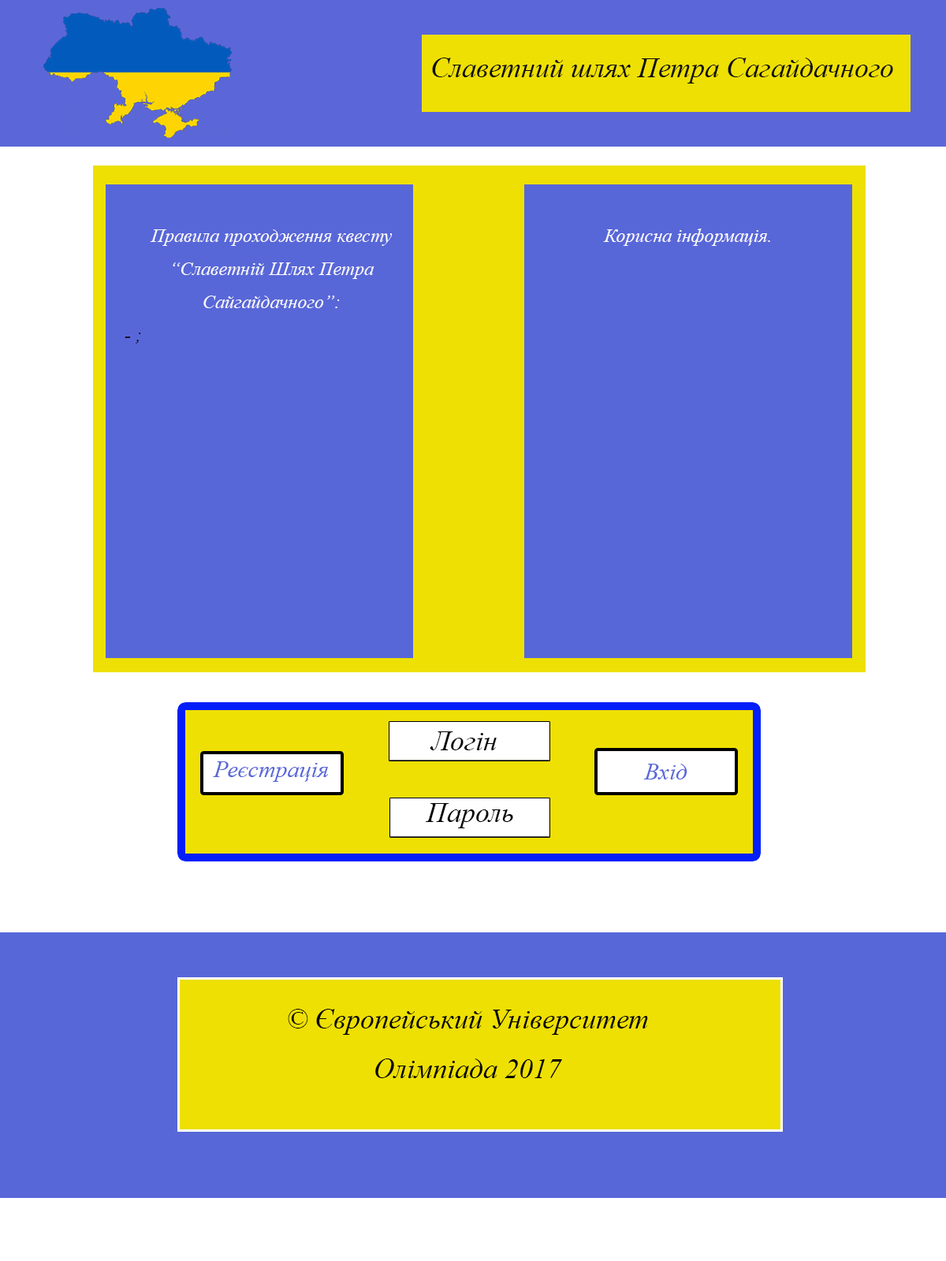
<style>
.page{position:relative;width:946px;height:1261px;background:#5867d8}
.page>*{position:absolute;margin:0}
.t1{font:28.4px "TimesNewRomanPS-ItalicMT";color:#0f0e0e}
.t2{font:18.9px "TimesNewRomanPS-ItalicMT";color:#fcfafa}
.t3{font:18.9px "TimesNewRomanPS-ItalicMT";color:#0f0e0e}
.t4{font:18.9px "TimesNewRomanPS-ItalicMT";color:#fffcfc}
.t5{font:28.4px "TimesNewRomanPS-ItalicMT";color:#060606}
.t6{font:23.6px "TimesNewRomanPS-ItalicMT";color:#5867d8}
.t7{font:28.4px "TimesNewRomanPS-ItalicMT";color:#050000}
</style>
<div class="page">
<p class="t1" style="left:432px;top:58px;width:461px;height:26px">Славетний шлях Петра Сагайдачного</p>
<p class="t2" style="left:125px;top:229px;width:267px;height:115px;text-align:center">Правила проходження квесту “Славетній Шлях Петра Сайгайдачного”:<br><span class="t3">- ;</span></p>
<p class="t4" style="left:603px;top:229px;width:167px;height:17px">Корисна інформація.</p>
<p class="t5" style="left:429px;top:731px;width:67px;height:19px">Логін</p>
<p class="t6" style="left:213px;top:761px;width:115px;height:21px">Реєстрація</p>
<p class="t5" style="left:643px;top:764px;width:44px;height:15px"><span class="t6">Вхід </span>парапросоособтстого кабінету</p>
<p class="t5" style="left:426px;top:803px;width:87px;height:25px">Пароль</p>
<p class="t7" style="left:288px;top:1009px;width:360px;height:69px;text-align:center">© Європейський Університет<br>Олімпіада 2017</p>
</div>
